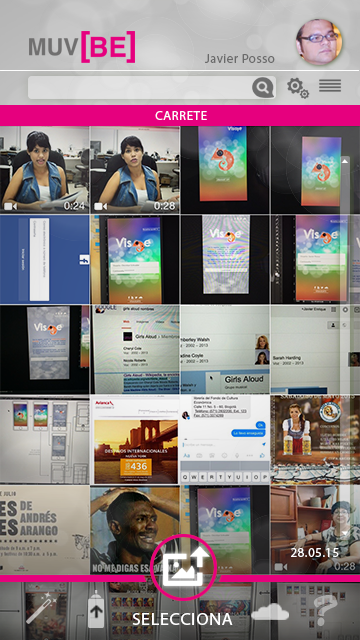
<style>
.page{position:relative;width:360px;height:640px}
.page>*{position:absolute;margin:0}
.t1{font:13px "MyriadPro-Regular";letter-spacing:0.035em;color:#6a6a6a}
.t2{font:13px "MyriadPro-Regular";letter-spacing:0.035em;color:#fdfdfe}
.t3{font:35.4px "CandyScript";letter-spacing:0.035em;color:#a8a8a7}
.t4{font:17.5px "MyriadPro-Regular";letter-spacing:0.035em;color:#ffffff;scale:1.03 1}
</style>
<div class="page">
<p class="t1" style="left:205px;top:54px;width:70px;height:9px">Javier Posso</p>
<p class="t2" style="left:155px;top:111px;width:52px;height:9px">CARRETE</p>
<p class="t2" style="left:291px;top:548px;width:48px;height:9px">28.05.15</p>
<p class="t3" style="left:313px;top:595px;width:25px;height:31px">?</p>
<p class="t4" style="left:132px;top:613px;width:101px;height:12px">SELECCIONA</p>
</div>
